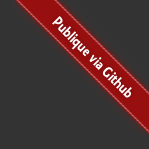
<style>
.page{position:relative;width:149px;height:149px;background:#333333}
.page>*{position:absolute;margin:0}
.t1{font:16px "Collegiate";color:#ffffff}
</style>
<div class="page">
<p class="t1" style="left:52px;top:16px;width:80px;height:82px;rotate:45deg">Publique via Github</p>
</div>
